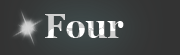
<style>
.page{position:relative;width:180px;height:55px}
.page>*{position:absolute;margin:0}
.t1{font:16.3px "Georgia-Bold";scale:0.93 1}
</style>
<div class="page">
<p class="t1" style="left:45px;top:14px;width:79px;height:24px">Four</p>
</div>
